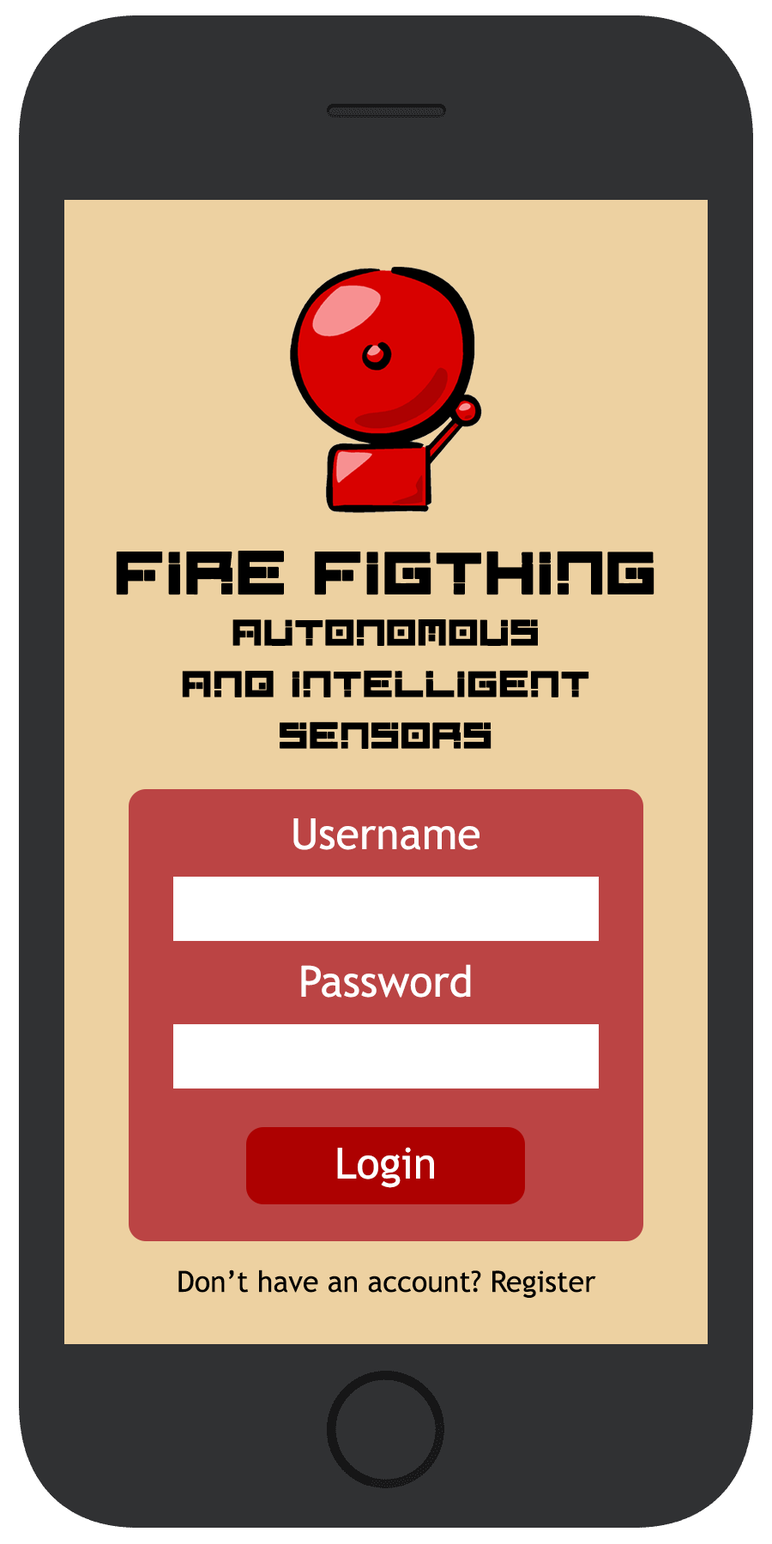
<style>
.page{position:relative;width:772px;height:1544px;background:#edd1a1}
.page>*{position:absolute;margin:0}
.t1{font:34.3px/51.5px "DigitalFirebomb";color:#000000;text-transform:uppercase;font-weight:bold}
.t2{font:56.6px/72.1px "DigitalFirebomb";color:#000000;text-transform:uppercase;font-weight:bold}
.t3{font:42.9px "TrebuchetMS";color:#ffffff}
.t4{font:29.2px "TrebuchetMS";color:#000000}
</style>
<div class="page">
<p class="t1" style="left:116px;top:551px;width:539px;height:198px;text-align:center"><span class="t2">FIRE FIGTHING<br></span>Autonomous<br>and Intelligent<br>sensors</p>
<p class="t3" style="left:293px;top:818px;width:187px;height:32px">Username</p>
<p class="t3" style="left:301px;top:964px;width:170px;height:34px">Password</p>
<p class="t3" style="left:337px;top:1147px;width:97px;height:41px">Login</p>
<p class="t4" style="left:178px;top:1270px;width:418px;height:28px">Don’t have an account? Register</p>
</div>
